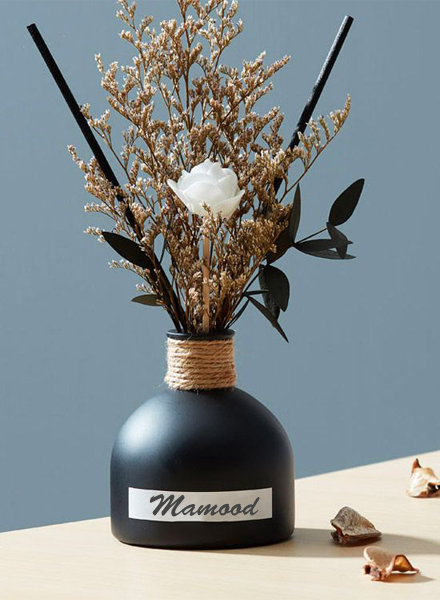
<style>
.page{position:relative;width:440px;height:600px}
.page>*{position:absolute;margin:0}
.t1{font:30.2px "BrushScriptStd";color:#444444}
</style>
<div class="page">
<p class="t1" style="left:149px;top:494px;width:111px;height:23px">Mamood</p>
</div>
